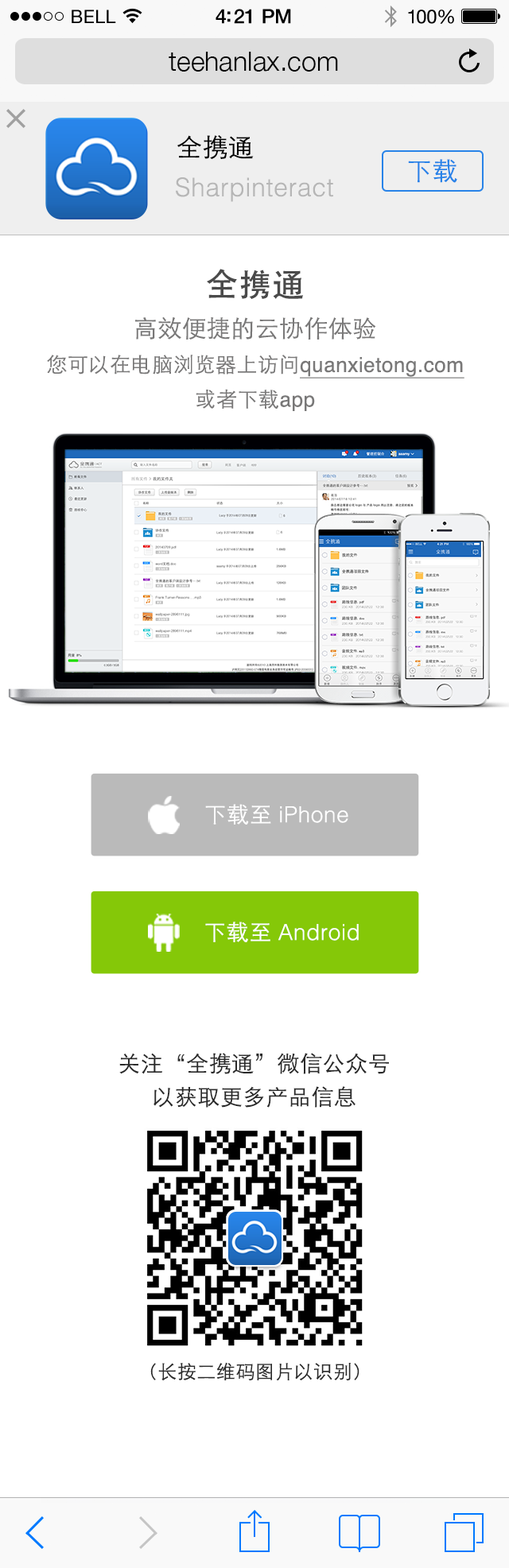
<style>
.page{position:relative;width:509px;height:1568px;background:#ffffff}
.page>*{position:absolute;margin:0}
.t1{font:27px "HelveticaNeue-Light";color:#000000}
.t2{font:25.4px "STHeitiSC-Light";letter-spacing:0.02em;color:#000000}
.t3{font:25.4px "STHeitiSC-Light";letter-spacing:0.02em;color:#2883e8}
.t4{font:25.4px "Helvetica-Light";letter-spacing:0.02em;color:#b6b6b6}
.t5{font:32.5px "STHeitiSC-Medium";letter-spacing:0.02em;color:#4a4a4a}
.t6{font:23.8px "STHeitiSC-Light";letter-spacing:0.02em;color:#797878}
.t7{font:20.7px/34.6px "Helvetica";letter-spacing:0.02em;color:#797878;text-decoration:underline}
.t8{font:20.7px/34.6px "STHeitiSC-Light";letter-spacing:0.02em;color:#797878}
.t9{font:20.7px/34.6px "Helvetica";letter-spacing:0.02em;color:#797878}
.t10{font:22.3px "Helvetica-Light";letter-spacing:0.02em;color:#ffffff}
.t11{font:22.3px "STHeitiSC-Light";letter-spacing:0.02em;color:#ffffff}
.t12{font:22.3px/33.4px "STHeitiSC-Light";letter-spacing:0.02em;color:#2a2a2a}
.t13{font:19.1px "STHeitiSC-Light";letter-spacing:0.02em;color:#2a2a2a}
</style>
<div class="page">
<p class="t1" style="left:169px;top:52px;width:169px;height:20px">teehanlax.com</p>
<p class="t2" style="left:177px;top:135px;width:77px;height:24px">全携通</p>
<p class="t3" style="left:408px;top:159px;width:49px;height:24px">下载</p>
<p class="t4" style="left:176px;top:177px;width:157px;height:25px">Sharpinteract</p>
<p class="t5" style="left:207px;top:269px;width:96px;height:30px">全携通</p>
<p class="t6" style="left:135px;top:316px;width:241px;height:24px">高效便捷的云协作体验</p>
<p class="t7" style="left:47px;top:355px;width:417px;height:56px;text-align:center"><span class="t8">您可以在电脑浏览器上访问</span>quanxietong.com<br><span class="t8">或者下载</span><span class="t9">app</span></p>
<p class="t10" style="left:205px;top:804px;width:143px;height:21px"><span class="t11">下载至 </span>iPhone</p>
<p class="t10" style="left:205px;top:922px;width:154px;height:20px"><span class="t11">下载至 </span>Android</p>
<p class="t12" style="left:119px;top:1053px;width:270px;height:55px;text-align:center">关注“全携通”微信公众号<br>以获取更多产品信息</p>
<p class="t13" style="left:150px;top:1362px;width:209px;height:19px">（长按二维码图片以识别）</p>
</div>
